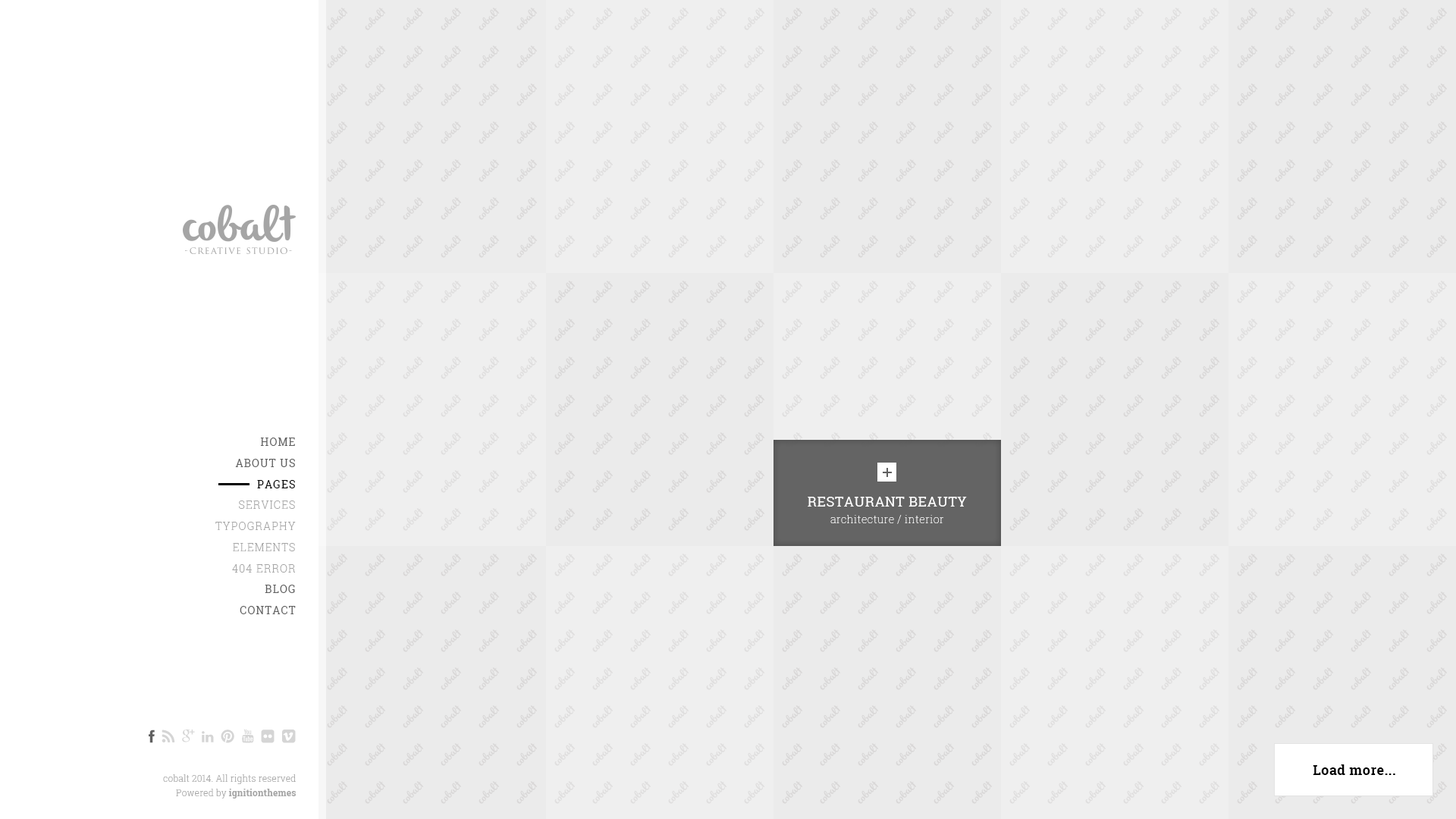
<style>
.page{position:relative;width:1456px;height:819px;background:#ebebeb}
.page>*{position:absolute;margin:0}
.t1{font:10.6px/21.2px "RobotoSlab-Regular";letter-spacing:0.08em;color:#606060}
.t2{font:10.6px/21.2px "RobotoSlab-Regular";letter-spacing:0.08em;color:#000000}
.t3{font:13.6px "RobotoSlab-Regular";letter-spacing:0.03em;color:#ffffff;text-transform:uppercase}
.t4{font:10.6px/21.2px "RobotoSlab-Light";letter-spacing:0.08em;color:#a5a5a5}
.t5{font:10.6px "RobotoSlab-Thin";letter-spacing:0.03em;color:#ffffff}
.t6{font:13.6px "RobotoSlab-Bold";letter-spacing:0.03em;color:#000000}
.t7{font:13.6px "RobotoSlab-Bold";letter-spacing:0.03em;color:#000000;text-transform:uppercase}
.t8{font:9.1px/14.4px "RobotoSlab-Light";letter-spacing:0.01em;color:#a5a5a5}
.t9{font:9.1px/14.4px "RobotoSlab-Bold";letter-spacing:0.01em;color:#a5a5a5}
</style>
<div class="page">
<p class="t1" style="left:235px;top:438px;width:60px;height:50px;text-align:right">HOME<br>ABOUT US<br><span class="t2">PAGES</span></p>
<p class="t3" style="left:808px;top:497px;width:159px;height:10px">RESTAURANT BEAUTY</p>
<p class="t4" style="left:215px;top:500px;width:81px;height:73px;text-align:right">SERVICES<br>TYPOGRAPHY<br>ELEMENTS<br>404 ERROR</p>
<p class="t5" style="left:830px;top:515px;width:114px;height:9px">architecture / interior</p>
<p class="t1" style="left:240px;top:585px;width:56px;height:29px;text-align:right">BLOG<br>CONTACT</p>
<p class="t6" style="left:1313px;top:764px;width:82px;height:11px"><span class="t7">L</span>oad more<span class="t7">...</span></p>
<p class="t8" style="left:163px;top:774px;width:133px;height:25px;text-align:right">cobalt 2014. All rights reserved<br>Powered by <span class="t9">ignitionthemes</span></p>
</div>
